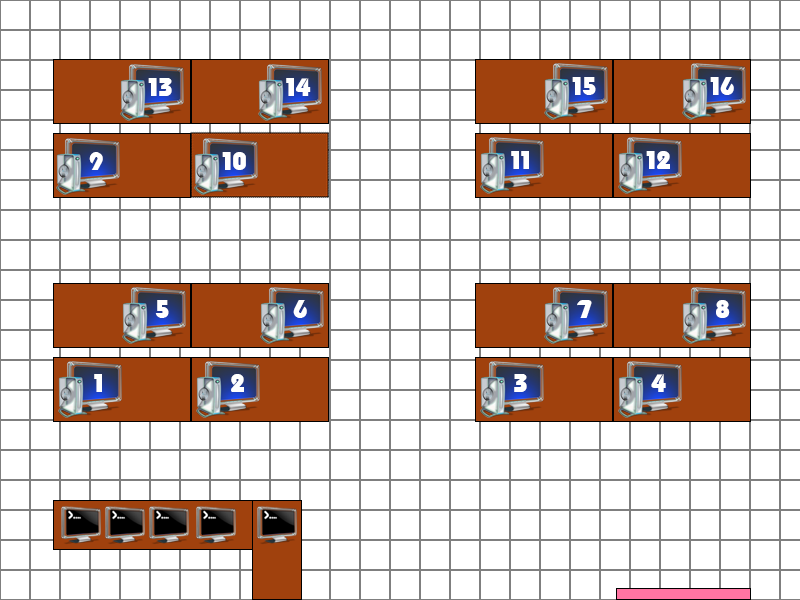
<style>
.page{position:relative;width:800px;height:600px;background:#ffffff}
.page>*{position:absolute;margin:0}
.t1{font:25px "Fingerpop";color:#ffffff}
</style>
<div class="page">
<p class="t1" style="left:148px;top:78px;width:24px;height:18px">13</p>
<p class="t1" style="left:286px;top:78px;width:25px;height:18px">14</p>
<p class="t1" style="left:572px;top:77px;width:24px;height:18px">15</p>
<p class="t1" style="left:710px;top:77px;width:24px;height:18px">16</p>
<p class="t1" style="left:89px;top:152px;width:14px;height:18px">9</p>
<p class="t1" style="left:222px;top:152px;width:24px;height:18px">10</p>
<p class="t1" style="left:511px;top:151px;width:18px;height:18px">11</p>
<p class="t1" style="left:646px;top:151px;width:24px;height:18px">12</p>
<p class="t1" style="left:155px;top:300px;width:14px;height:18px">5</p>
<p class="t1" style="left:293px;top:300px;width:14px;height:18px">6</p>
<p class="t1" style="left:577px;top:300px;width:15px;height:18px">7</p>
<p class="t1" style="left:716px;top:300px;width:14px;height:18px">8</p>
<p class="t1" style="left:94px;top:374px;width:8px;height:18px">1</p>
<p class="t1" style="left:231px;top:374px;width:13px;height:18px">2</p>
<p class="t1" style="left:514px;top:374px;width:13px;height:18px">3</p>
<p class="t1" style="left:651px;top:374px;width:15px;height:18px">4</p>
</div>
